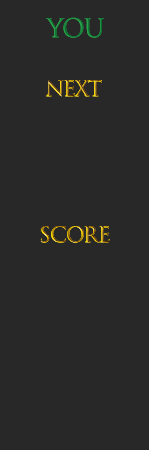
<style>
.page{position:relative;width:149px;height:450px;background:#282828}
.page>*{position:absolute;margin:0}
.t1{font:25px "TrajanColor-Concept";letter-spacing:-0.05em}
.t2{font:20.8px "TrajanColor-Concept";letter-spacing:-0.05em}
</style>
<div class="page">
<p class="t1" style="left:45px;top:17px;width:59px;height:21px">YOU</p>
<p class="t2" style="left:45px;top:80px;width:57px;height:17px">NEXT</p>
<p class="t2" style="left:40px;top:226px;width:70px;height:17px">Score</p>
</div>
